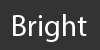
<style>
.page{position:relative;width:100px;height:50px;background:#333333}
.page>*{position:absolute;margin:0}
.t1{font:30px "MyriadPro-Regular";color:#ffffff}
</style>
<div class="page">
<p class="t1" style="left:13px;top:14px;width:74px;height:28px">Bright</p>
</div>
